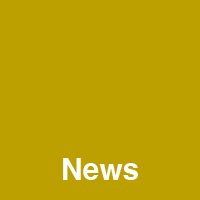
<style>
.page{position:relative;width:200px;height:200px;background:#bca000}
.page>*{position:absolute;margin:0}
.t1{font:30px "Helvetica-Bold";color:#ffffff}
</style>
<div class="page">
<p class="t1" style="left:63px;top:158px;width:75px;height:22px">News</p>
</div>
